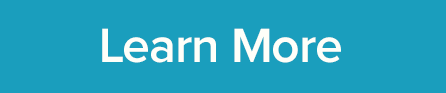
<style>
.page{position:relative;width:446px;height:93px;background:#1a9ebd}
.page>*{position:absolute;margin:0}
.t1{font:50px "ProximaNova-Semibold";letter-spacing:-0.02em;color:#fefff9}
</style>
<div class="page">
<p class="t1" style="left:102px;top:28px;width:239px;height:35px">Learn More</p>
</div>
